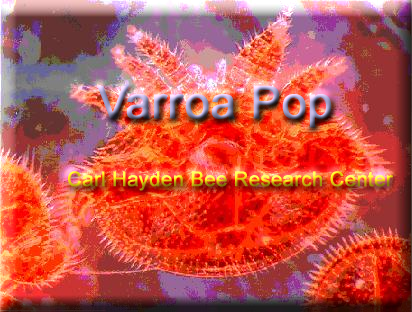
<style>
.page{position:relative;width:412px;height:312px}
.page>*{position:absolute;margin:0}
.t1{font:45px "ArialMT";font-weight:bold}
.t2{font:20px "ArialMT";font-weight:bold}
</style>
<div class="page">
<p class="t1" style="left:97px;top:85px;width:235px;height:43px">Varroa Pop</p>
<p class="t2" style="left:68px;top:171px;width:325px;height:20px">Carl Hayden Bee Research Center</p>
</div>
